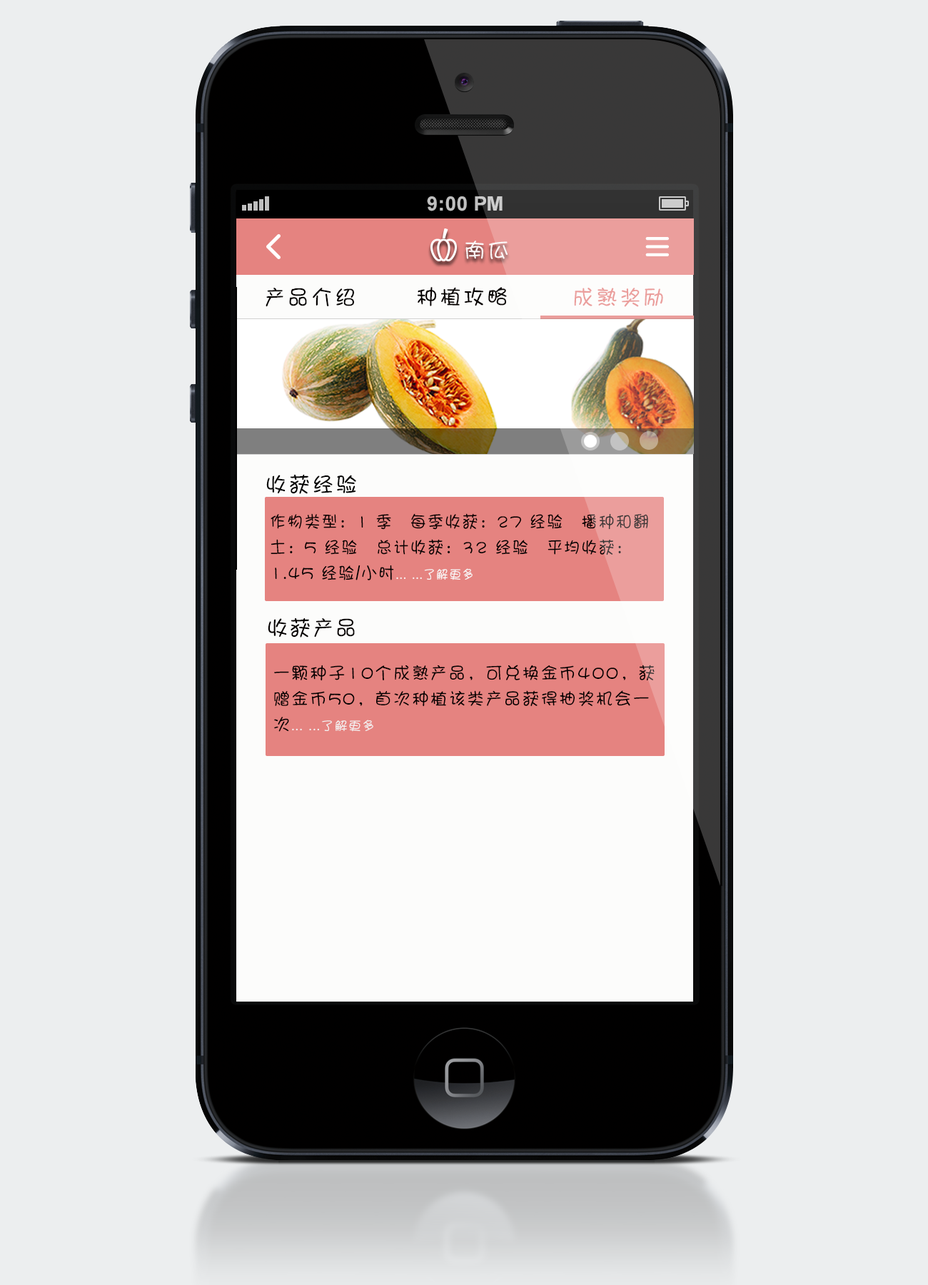
<style>
.page{position:relative;width:928px;height:1285px;background:#eceeef}
.page>*{position:absolute;margin:0}
.t1{font:21.4px "DFPShaoNvW5";letter-spacing:0.1em;color:#faf5f5}
.t2{font:21.4px "DFPShaoNvW5";letter-spacing:0.1em;color:#030000}
.t3{font:21.4px "DFPShaoNvW5";letter-spacing:0.1em;color:#050000}
.t4{font:21.4px "DFPShaoNvW5";letter-spacing:0.1em;color:#eb9e9c}
.t5{font:21.4px "DFPShaoNvW5";letter-spacing:0.1em;color:#000000}
.t6{font:17.1px/25.7px "DFPShaoNvW5";letter-spacing:0.075em;color:#070000;scale:0.94 1}
.t7{font:17.1px/25.7px "DFPShaoNvW5";letter-spacing:0.075em;color:#000000;scale:0.94 1}
.t8{font:12.8px/25.7px "DFPShaoNvW5";letter-spacing:0.075em;color:#f9f8f8;scale:0.94 1}
.t9{font:21.4px "DFPShaoNvW5";letter-spacing:0.075em;color:#040000}
.t10{font:17.1px/25.7px "DFPShaoNvW5";letter-spacing:0.075em;color:#040000}
.t11{font:12.8px/25.7px "DFPShaoNvW5";letter-spacing:0.075em;color:#f3f0f0}
</style>
<div class="page">
<p class="t1" style="left:465px;top:241px;width:43px;height:18px">南瓜</p>
<p class="t2" style="left:266px;top:288px;width:88px;height:19px">产品介绍</p>
<p class="t3" style="left:417px;top:287px;width:90px;height:19px">种植攻略</p>
<p class="t4" style="left:574px;top:288px;width:89px;height:19px">成熟奖励</p>
<p class="t5" style="left:266px;top:474px;width:90px;height:20px">收获经验</p>
<p class="t6" style="left:271px;top:513px;width:377px;height:67px">作物类型：1 季　每季收获：27 经验　播种和翻土：5 经验　总计<span class="t7">收获：32 经验　平均收获：1.45 经验/小时</span><span class="t8">... ...了解更多</span></p>
<p class="t9" style="left:268px;top:617px;width:87px;height:20px">收获产品</p>
<p class="t10" style="left:274px;top:665px;width:381px;height:67px">一颗种子10个成熟产品，可兑换金币400，获赠金币50，首次种植该类产品获得抽奖机会一次<span class="t11">... ...了解更多</span></p>
</div>
